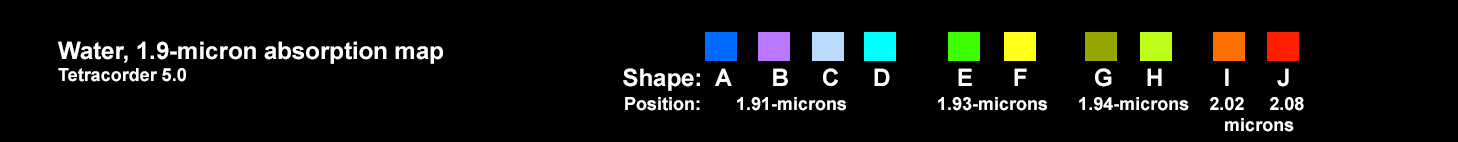
<style>
.page{position:relative;width:1458px;height:142px;background:#000000}
.page>*{position:absolute;margin:0}
.t1{font:24px "Arial-BoldMT";color:#ffffff}
.t2{font:18px "Arial-BoldMT";color:#ffffff}
</style>
<div class="page">
<p class="t1" style="left:58px;top:41px;width:385px;height:41px">Water, 1.9-micron absorption map<br><span class="t2">Tetracorder 5.0</span></p>
<p class="t1" style="left:623px;top:68px;width:666px;height:23px">Shape:  A      B     C     D          E      F          G     H         I       J</p>
<p class="t2" style="left:625px;top:97px;width:679px;height:35px">Position:       1.91-microns                  1.93-microns      1.94-microns    2.02     2.08<br>                                                                                                                        microns</p>
</div>
